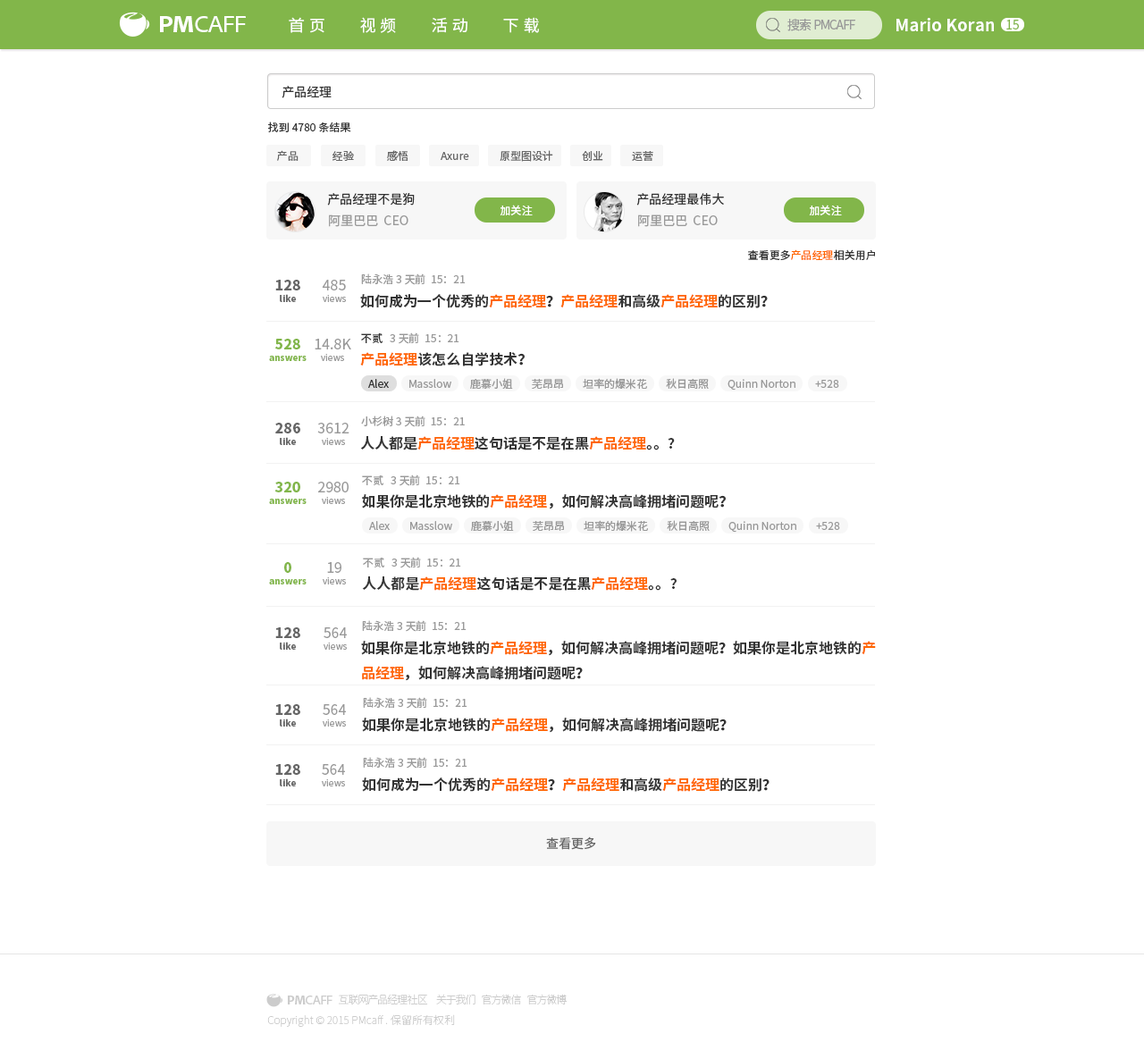
<style>
.page{position:relative;width:1144px;height:1042px;background:#ffffff}
.page>*{position:absolute;margin:0}
.t1{font:24.3px "CleanPro-05pt";letter-spacing:-0.085em;color:#ffffff}
.t2{font:24.5px "CleanPro-Bold05pt";letter-spacing:-0.085em;color:#ffffff}
.t3{font:16.1px "NotoSansHans-Regular";letter-spacing:0.27em;color:#ffffff}
.t4{font:16.1px "NotoSansHans-Bold";color:#ffffff;scale:1.04 1}
.t5{font:12.5px "NotoSansHans-DemiLight";letter-spacing:-0.085em;color:#999999}
.t6{font:12.5px "NotoSansHans-Regular";color:#82b64a}
.t7{font:12.5px "NotoSansHans-Regular";color:#333333}
.t8{font:10.7px "NotoSansHans-Regular";color:#333333}
.t9{font:10.7px "NotoSansHans-Regular";color:#666666}
.t10{font:10.7px "NotoSansHans-Regular";color:#ffffff}
.t11{font:12.5px "NotoSansHans-Regular";color:#999999}
.t12{font:10.7px "NotoSansHans-Regular";color:#ff6600}
.t13{font:8.9px/16.1px "NotoSansHans-Black";color:#666666}
.t14{font:14.3px/16.1px "NotoSansHans-Black";color:#666666}
.t15{font:8.9px/16.1px "NotoSansHans-Regular";color:#999999}
.t16{font:14.3px/16.1px "NotoSansHans-Regular";color:#999999}
.t17{font:10.7px "NotoSansHans-Regular";color:#999999}
.t18{font:14.3px "NotoSansHans-Bold";color:#333333}
.t19{font:14.3px "NotoSansHans-Bold";color:#ff6600}
.t20{font:8.9px/16.1px "NotoSansHans-Black";color:#82b64a}
.t21{font:14.3px/16.1px "NotoSansHans-Black";color:#82b64a}
.t22{font:12.5px "NotoSansHans-Regular";color:#666666}
.t23{font:12.6px "CleanPro-05pt";letter-spacing:-0.085em;color:#cccccc}
.t24{font:12.7px "CleanPro-Bold05pt";letter-spacing:-0.085em;color:#cccccc}
.t25{font:10.7px "NotoSansHans-Thin";letter-spacing:-0.085em;color:#cccccc}
.t26{font:10.7px "NotoSansHans-Thin";color:#cccccc}
</style>
<div class="page">
<p class="t1" style="left:160px;top:16px;width:86px;height:16px"><span class="t2">PM</span>CAFF</p>
<p class="t3" style="left:289px;top:17px;width:35px;height:16px">首页</p>
<p class="t3" style="left:360px;top:17px;width:36px;height:16px">视频</p>
<p class="t3" style="left:432px;top:17px;width:35px;height:16px">活动</p>
<p class="t3" style="left:503px;top:17px;width:36px;height:16px">下载</p>
<p class="t4" style="left:897px;top:18px;width:97px;height:13px">Mario Koran</p>
<p class="t5" style="left:787px;top:19px;width:68px;height:12px">搜索PMCAFF</p>
<p class="t6" style="left:1006px;top:20px;width:13px;height:9px">15</p>
<p class="t7" style="left:282px;top:86px;width:50px;height:12px">产品经理</p>
<p class="t8" style="left:268px;top:122px;width:83px;height:10px">找到4780条结果</p>
<p class="t9" style="left:277px;top:150px;width:22px;height:11px">产品</p>
<p class="t9" style="left:333px;top:151px;width:21px;height:10px">经验</p>
<p class="t9" style="left:387px;top:150px;width:21px;height:11px">感悟</p>
<p class="t9" style="left:441px;top:152px;width:28px;height:8px">Axure</p>
<p class="t9" style="left:500px;top:150px;width:53px;height:12px">原型图设计</p>
<p class="t9" style="left:582px;top:151px;width:21px;height:10px">创业</p>
<p class="t9" style="left:632px;top:151px;width:21px;height:10px">运营</p>
<p class="t7" style="left:327px;top:193px;width:88px;height:13px">产品经理不是狗</p>
<p class="t7" style="left:636px;top:193px;width:88px;height:13px">产品经理最伟大</p>
<p class="t10" style="left:500px;top:205px;width:33px;height:10px">加关注</p>
<p class="t10" style="left:809px;top:205px;width:33px;height:10px">加关注</p>
<p class="t11" style="left:329px;top:215px;width:79px;height:12px">阿里巴巴  CEO</p>
<p class="t11" style="left:638px;top:215px;width:80px;height:12px">阿里巴巴  CEO</p>
<p class="t8" style="left:747px;top:249px;width:128px;height:11px">查看更多<span class="t12">产品经理</span>相关用户</p>
<p class="t13" style="left:275px;top:280px;width:25px;height:22px;text-align:center"><span class="t14">128<br></span>like</p>
<p class="t15" style="left:322px;top:280px;width:24px;height:22px;text-align:center"><span class="t16">485<br></span>views</p>
<p class="t17" style="left:361px;top:274px;width:105px;height:11px">陆永浩3天前  15：21</p>
<p class="t18" style="left:360px;top:294px;width:408px;height:14px">如何成为一个优秀的<span class="t19">产品经理</span>？<span class="t19">产品经理</span>和高级<span class="t19">产品经理</span>的区别？</p>
<p class="t20" style="left:269px;top:339px;width:38px;height:22px;text-align:center"><span class="t21">528<br></span>answers</p>
<p class="t16" style="left:315px;top:339px;width:36px;height:22px;text-align:center">14.8K<br><span class="t15">views</span></p>
<p class="t17" style="left:361px;top:333px;width:98px;height:11px"><span class="t8">不贰</span>   3天前  15：21</p>
<p class="t18" style="left:360px;top:352px;width:165px;height:14px"><span class="t19">产品经理</span>该怎么自学技术？</p>
<p class="t8" style="left:368px;top:379px;width:21px;height:9px">Alex</p>
<p class="t17" style="left:409px;top:379px;width:42px;height:9px">Masslow</p>
<p class="t17" style="left:470px;top:378px;width:43px;height:11px">鹿慕小姐</p>
<p class="t17" style="left:532px;top:379px;width:31px;height:10px">芜昂昂</p>
<p class="t17" style="left:583px;top:378px;width:64px;height:12px">坦率的爆米花</p>
<p class="t17" style="left:666px;top:378px;width:43px;height:11px">秋日高照</p>
<p class="t17" style="left:728px;top:379px;width:68px;height:12px">Quinn Norton</p>
<p class="t17" style="left:815px;top:380px;width:24px;height:8px">+528</p>
<p class="t13" style="left:275px;top:423px;width:25px;height:22px;text-align:center"><span class="t14">286<br></span>like</p>
<p class="t15" style="left:317px;top:423px;width:32px;height:22px;text-align:center"><span class="t16">3612<br></span>views</p>
<p class="t17" style="left:361px;top:416px;width:104px;height:11px">小杉树 3天前  15：21</p>
<p class="t18" style="left:360px;top:436px;width:315px;height:14px">人人都是<span class="t19">产品经理</span>这句话是不是在黑<span class="t19">产品经理</span>。。?</p>
<p class="t20" style="left:269px;top:482px;width:38px;height:22px;text-align:center"><span class="t21">320<br></span>answers</p>
<p class="t15" style="left:318px;top:482px;width:31px;height:22px;text-align:center"><span class="t16">2980<br></span>views</p>
<p class="t17" style="left:362px;top:475px;width:98px;height:11px">不贰   3天前  15：21</p>
<p class="t18" style="left:362px;top:494px;width:364px;height:15px">如果你是北京地铁的<span class="t19">产品经理</span>，如何解决高峰拥堵问题呢？</p>
<p class="t17" style="left:369px;top:521px;width:21px;height:9px">Alex</p>
<p class="t17" style="left:410px;top:521px;width:42px;height:9px">Masslow</p>
<p class="t17" style="left:471px;top:520px;width:43px;height:11px">鹿慕小姐</p>
<p class="t17" style="left:533px;top:521px;width:31px;height:10px">芜昂昂</p>
<p class="t17" style="left:584px;top:520px;width:64px;height:12px">坦率的爆米花</p>
<p class="t17" style="left:667px;top:520px;width:43px;height:11px">秋日高照</p>
<p class="t17" style="left:728px;top:521px;width:68px;height:12px">Quinn Norton</p>
<p class="t17" style="left:816px;top:522px;width:24px;height:8px">+528</p>
<p class="t17" style="left:363px;top:557px;width:98px;height:11px">不贰   3天前  15：21</p>
<p class="t20" style="left:269px;top:562px;width:38px;height:23px;text-align:center"><span class="t21">0<br></span>answers</p>
<p class="t15" style="left:323px;top:562px;width:23px;height:23px;text-align:center"><span class="t16">19<br></span>views</p>
<p class="t18" style="left:362px;top:577px;width:315px;height:14px">人人都是<span class="t19">产品经理</span>这句话是不是在黑<span class="t19">产品经理</span>。。?</p>
<p class="t13" style="left:275px;top:627px;width:25px;height:23px;text-align:center"><span class="t14">128<br></span>like</p>
<p class="t15" style="left:324px;top:627px;width:23px;height:23px;text-align:center"><span class="t16">564<br></span>views</p>
<p class="t17" style="left:362px;top:620px;width:105px;height:12px">陆永浩3天前  15：21</p>
<p class="t18" style="left:361px;top:641px;width:515px;height:40px">如果你是北京地铁的<span class="t19">产品经理</span>，如何解决高峰拥堵问题呢？如果你是北京地铁的<span class="t19">产<br>品经理</span>，如何解决高峰拥堵问题呢？</p>
<p class="t17" style="left:363px;top:697px;width:104px;height:12px">陆永浩3天前  15：21</p>
<p class="t13" style="left:275px;top:704px;width:25px;height:23px;text-align:center"><span class="t14">128<br></span>like</p>
<p class="t15" style="left:323px;top:704px;width:23px;height:23px;text-align:center"><span class="t16">564<br></span>views</p>
<p class="t18" style="left:362px;top:718px;width:365px;height:15px">如果你是北京地铁的<span class="t19">产品经理</span>，如何解决高峰拥堵问题呢？</p>
<p class="t17" style="left:363px;top:757px;width:104px;height:12px">陆永浩3天前  15：21</p>
<p class="t13" style="left:275px;top:764px;width:25px;height:23px;text-align:center"><span class="t14">128<br></span>like</p>
<p class="t15" style="left:322px;top:764px;width:23px;height:23px;text-align:center"><span class="t16">564<br></span>views</p>
<p class="t18" style="left:362px;top:778px;width:408px;height:14px">如何成为一个优秀的<span class="t19">产品经理</span>？<span class="t19">产品经理</span>和高级<span class="t19">产品经理</span>的区别？</p>
<p class="t22" style="left:546px;top:837px;width:50px;height:13px">查看更多</p>
<p class="t23" style="left:288px;top:996px;width:45px;height:9px"><span class="t24">PM</span>CAFF</p>
<p class="t25" style="left:339px;top:994px;width:89px;height:12px">互联网产品经理社区</p>
<p class="t25" style="left:436px;top:994px;width:40px;height:11px">关于我们</p>
<p class="t25" style="left:482px;top:994px;width:39px;height:12px">官方微信</p>
<p class="t25" style="left:527px;top:994px;width:41px;height:12px">官方微博</p>
<p class="t26" style="left:267px;top:1015px;width:188px;height:12px">Copyright © 2015 PMcaff . 保留所有权利</p>
</div>
